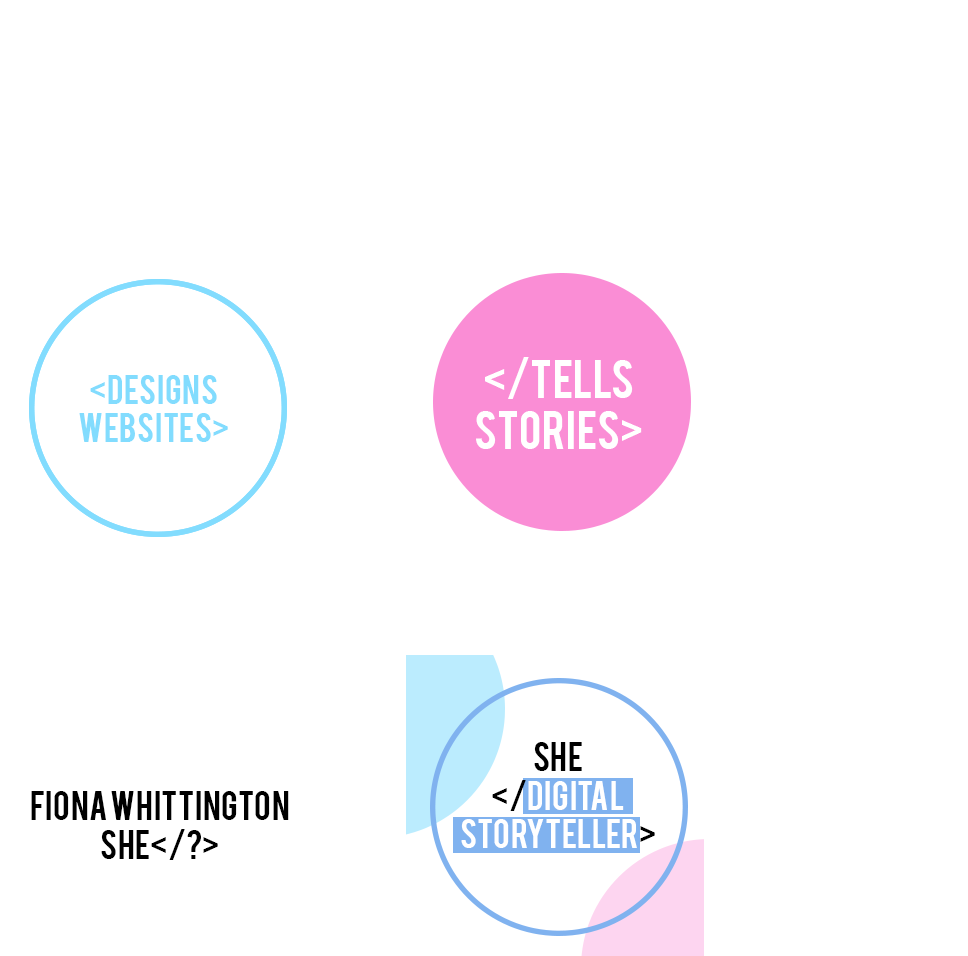
<style>
.page{position:relative;width:968px;height:956px;background:#ffffff}
.page>*{position:absolute;margin:0}
.t1{font:42.7px "Bebas";color:#ffffff}
.t2{font:32px "Bebas";color:#82dcfe}
.t3{font:32px "Bebas";color:#ffffff}
.t4{font:32px "Bebas";color:#000000}
</style>
<div class="page">
<p class="t1" style="left:476px;top:357px;width:166px;height:92px;text-align:center">&lt;/tells<br>stories&gt;</p>
<p class="t2" style="left:79px;top:375px;width:149px;height:67px;text-align:center">&lt;designs<br>websites&gt;</p>
<p class="t3" style="left:461px;top:742px;width:194px;height:106px;text-align:center"><span class="t4">she<br>&lt;/</span>digital<br>storyteller<span class="t4">&gt;</span></p>
<p class="t4" style="left:31px;top:791px;width:258px;height:69px;text-align:center">Fiona Whittington<br>she&lt;/?&gt;</p>
</div>
